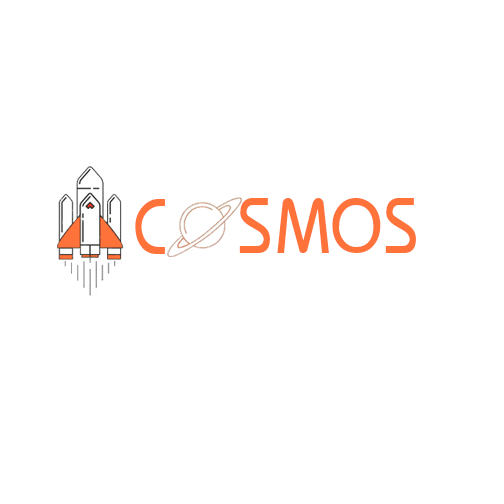
<style>
.page{position:relative;width:504px;height:504px;background:#ffffff}
.page>*{position:absolute;margin:0}
.t1{font:117px "DSNSingle";color:#ff723a}
</style>
<div class="page">
<p class="t1" style="left:239px;top:198px;width:31px;height:55px">S</p>
<p class="t1" style="left:277px;top:198px;width:52px;height:55px">M</p>
<p class="t1" style="left:332px;top:198px;width:49px;height:55px">O</p>
<p class="t1" style="left:385px;top:198px;width:31px;height:55px">S</p>
<p class="t1" style="left:135px;top:199px;width:30px;height:55px">C</p>
</div>
